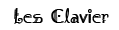
<style>
.page{position:relative;width:119px;height:30px;background:#ffffff}
.page>*{position:absolute;margin:0}
.t1{font:20.3px "Amadeus-Regular";color:#000000}
</style>
<div class="page">
<p class="t1" style="left:14px;top:8px;width:95px;height:16px">Les Clavier</p>
</div>
